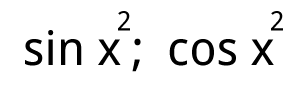
<style>
.page{position:relative;width:300px;height:90px;background:#ffffff}
.page>*{position:absolute;margin:0}
.t1{font:27px "DroidSans";color:#000000}
.t2{font:47.6px "DroidSans";color:#000000}
</style>
<div class="page">
<p class="t1" style="left:118px;top:11px;width:12px;height:20px">2</p>
<p class="t1" style="left:271px;top:11px;width:12px;height:20px">2</p>
<p class="t2" style="left:25px;top:30px;width:96px;height:36px">sin x</p>
<p class="t2" style="left:132px;top:38px;width:9px;height:34px">;</p>
<p class="t2" style="left:169px;top:39px;width:105px;height:27px">cos x</p>
</div>
